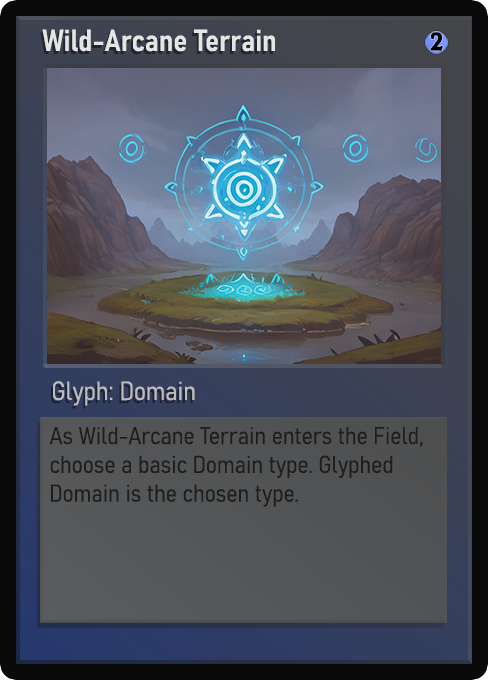
<style>
.page{position:relative;width:488px;height:680px}
.page>*{position:absolute;margin:0}
.t1{font:30px "Bahnschrift-SemiBoldSemiCondensed";color:#f2f2f2;font-weight:bold}
.t2{font:25px "WTRRoycroft";color:#000000;font-weight:bold;scale:1.09 1}
.t3{font:26px "Bahnschrift-LightSemiCondensed";color:#c8c8c8;font-weight:bold}
.t4{font:24px "Bahnschrift-LightSemiCondensed";color:#1e1e1e;font-weight:bold}
</style>
<div class="page">
<p class="t1" style="left:42px;top:29px;width:233px;height:23px;opacity:0.9">Wild-Arcane Terrain</p>
<p class="t2" style="left:430px;top:32px;width:13px;height:19px">2</p>
<p class="t3" style="left:53px;top:381px;width:142px;height:25px;opacity:0.9">Glyph: Domain</p>
<p class="t4" style="left:49px;top:427px;width:374px;height:80px">As Wild-Arcane Terrain enters the Field, choose a basic Domain type. Glyphed Domain is the chosen type.</p>
</div>
